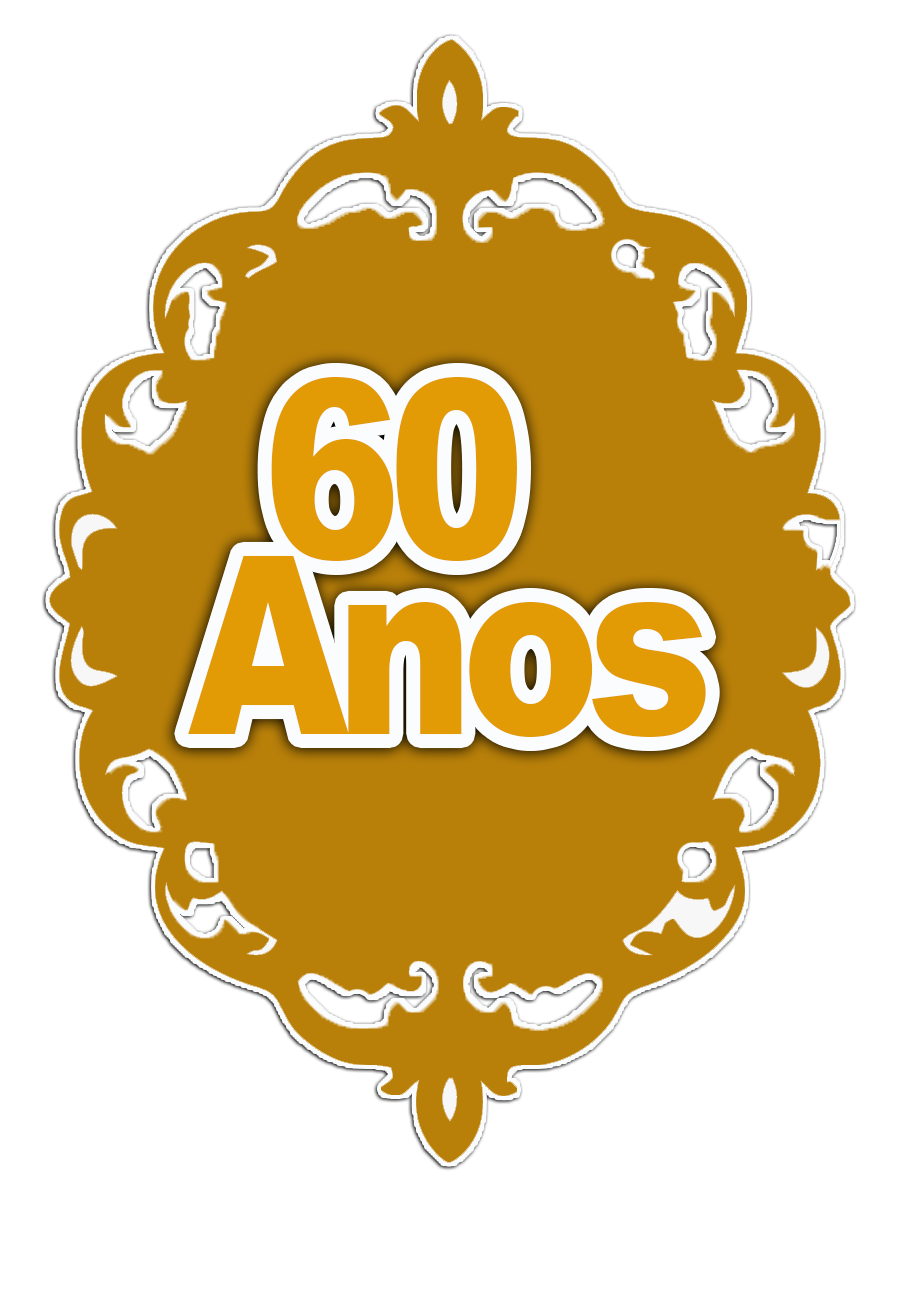
<style>
.page{position:relative;width:900px;height:1302px;background:#ffffff}
.page>*{position:absolute;margin:0}
.t1{font:249px/175.5px "Arial-Black";letter-spacing:-0.06em;color:#e29b04;scale:0.83 1}
.t2{font:300.8px/190.5px "Arial-Black";letter-spacing:-0.06em;color:#e29b04;text-transform:uppercase;font-weight:bold;scale:0.83 1}
.t3{font:249px/175.5px "Arial-Black";letter-spacing:-0.06em;color:#e29b04;text-transform:uppercase;scale:0.83 1}
</style>
<div class="page">
<p class="t1" style="left:188px;top:376px;width:518px;height:361px"><span class="t2"> </span><span class="t3">60<br></span>Anos</p>
</div>
